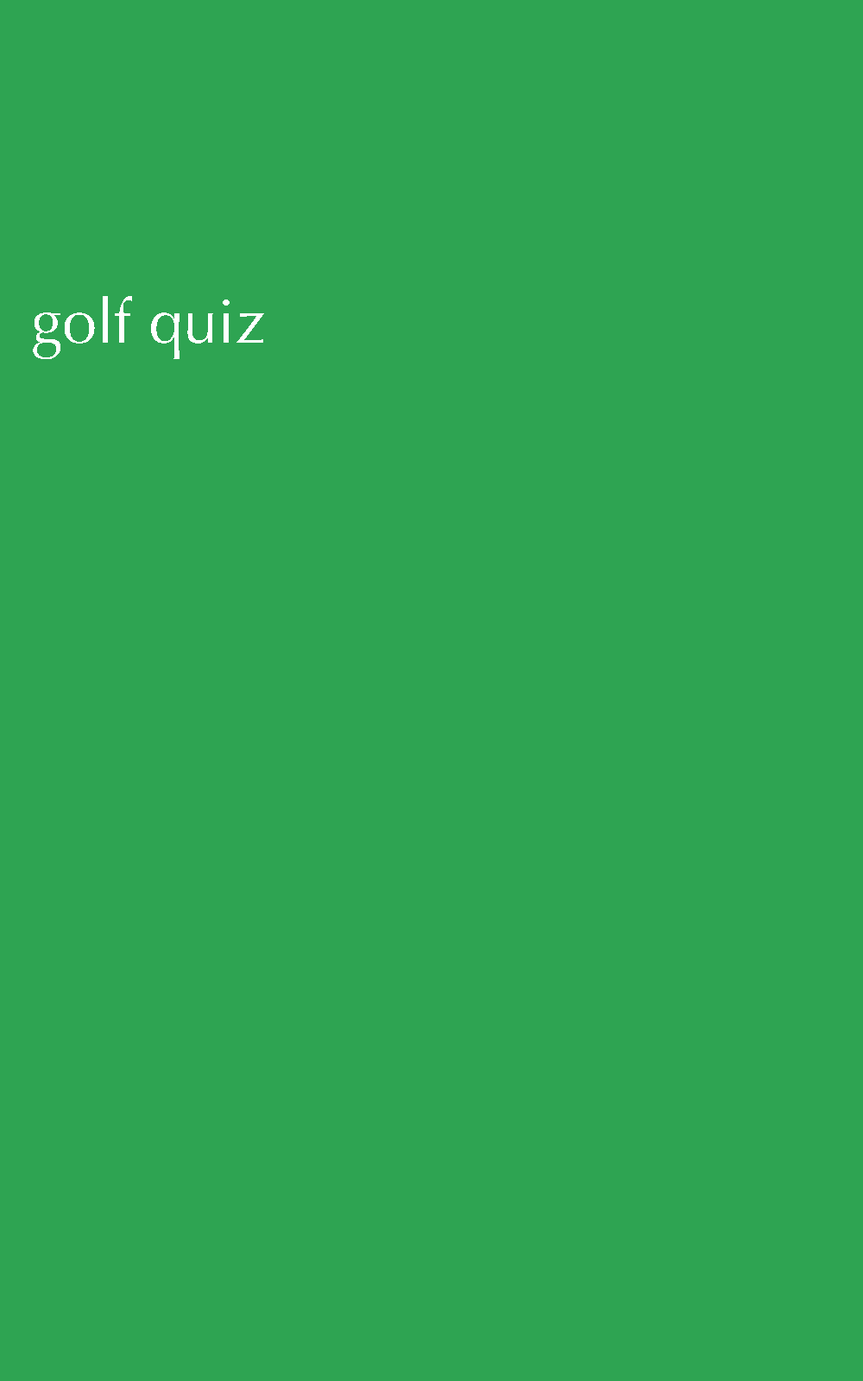
<style>
.page{position:relative;width:863px;height:1381px;background:#2ea452}
.page>*{position:absolute;margin:0}
.t1{font:62.2px "Optima-Regular";color:#ffffff}
</style>
<div class="page">
<p class="t1" style="left:33px;top:296px;width:231px;height:63px">golf quiz</p>
</div>
